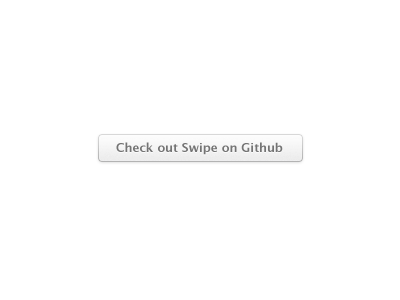
<style>
.page{position:relative;width:400px;height:300px;background:#ffffff}
.page>*{position:absolute;margin:0}
.t1{font:12px "LucidaGrande-Bold";color:#747474}
.t2{font:12px "LucidaGrande-Bold"}
</style>
<div class="page">
<p class="t1" style="left:116px;top:142px;width:167px;height:13px">Check out Swipe on Github</p>
<p class="t1" style="left:116px;top:142px;width:167px;height:13px">Check out Swipe on Github</p>
<p class="t2" style="left:116px;top:144px;width:167px;height:13px">Check out Swipe on Github</p>
</div>
